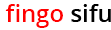
<style>
.page{position:relative;width:111px;height:30px;background:#ffffff}
.page>*{position:absolute;margin:0}
.t1{font:24px "OpenSans-Semibold";color:#ff0000}
.t2{font:24px "OpenSans-Semibold";color:#000000}
</style>
<div class="page">
<p class="t1" style="left:5px;top:4px;width:106px;height:24px">fingo <span class="t2">sifu</span></p>
</div>
